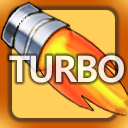
<style>
.page{position:relative;width:128px;height:128px;background:#ffcf59}
.page>*{position:absolute;margin:0}
.t1{font:36.6px "MalgunGothicBold";letter-spacing:-0.05em;color:#feeddb}
</style>
<div class="page">
<p class="t1" style="left:9px;top:55px;width:115px;height:28px">TURBO</p>
</div>
